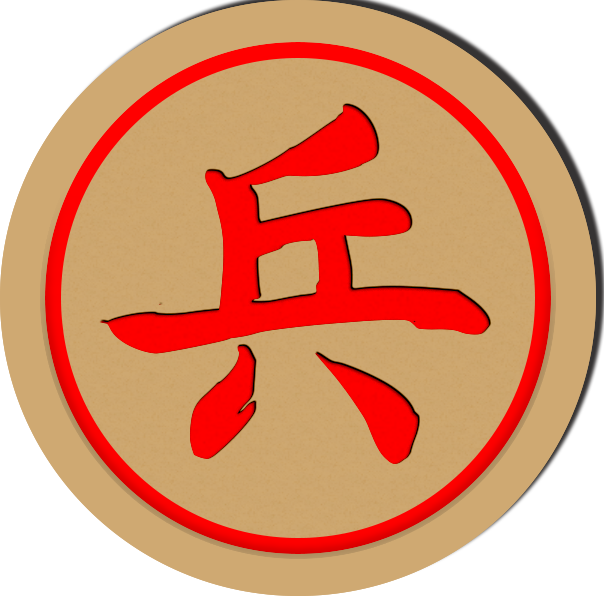
<style>
.page{position:relative;width:604px;height:608px;background:#ffffff}
.page>*{position:absolute;margin:0}
.t1{font:416.7px "AaYuwenlaoshidezi";letter-spacing:0.04em;color:#ff0000}
</style>
<div class="page">
<p class="t1" style="left:99px;top:105px;width:391px;height:359px;rotate:5deg">兵</p>
<p class="t1" style="left:99px;top:105px;width:391px;height:359px;rotate:5deg">兵</p>
</div>
